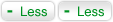
<style>
.page{position:relative;width:113px;height:22px}
.page>*{position:absolute;margin:0}
.t1{font:13px "Helvetica";color:#009122}
.t2{font:16.9px "Helvetica-Bold";color:#009122}
</style>
<div class="page">
<p class="t1" style="left:21px;top:6px;width:26px;height:11px">Less</p>
<p class="t1" style="left:78px;top:6px;width:26px;height:11px">Less</p>
<p class="t2" style="left:7px;top:10px;width:6px;height:3px">-</p>
<p class="t2" style="left:64px;top:10px;width:6px;height:3px">-</p>
</div>
